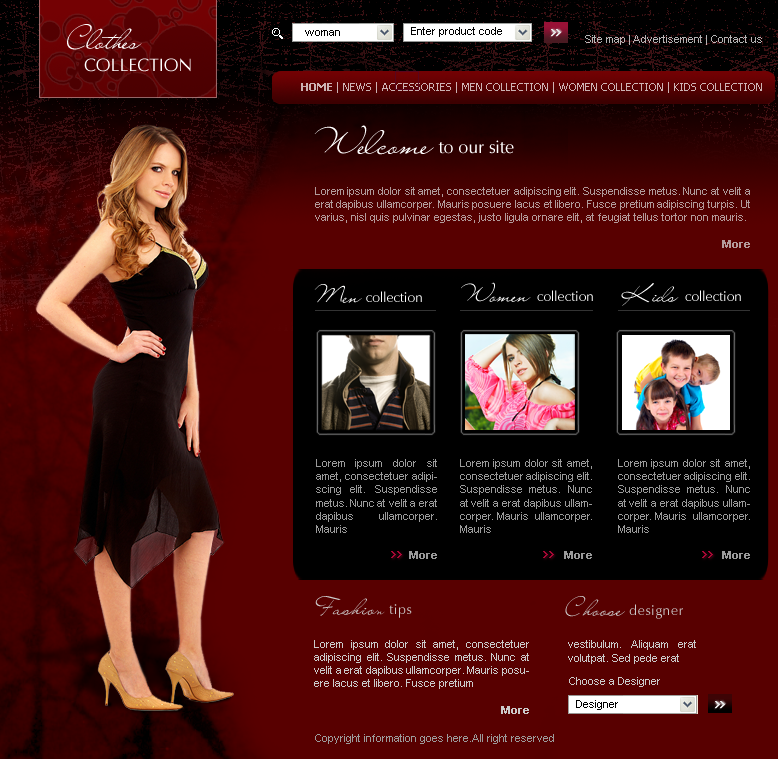
<style>
.page{position:relative;width:778px;height:759px;background:#000000}
.page>*{position:absolute;margin:0}
.t1{font:30px "LainieDaySH";color:#ffffff}
.t2{font:11px "ArialMT";color:#000000}
.t3{font:11px "ArialMT";color:#b3b3b3}
.t4{font:11px "Tahoma";letter-spacing:0.1em;color:#b3b3b3;text-transform:uppercase}
.t5{font:18px "ZapfHumanist601BT-Roman";color:#ffffff}
.t6{font:11px "Tahoma";color:#ceb3b4;text-transform:uppercase}
.t7{font:11px "Tahoma-Bold";color:#ceb3b4;text-transform:uppercase}
.t8{font:36px "LainieDaySH";color:#ffffff}
.t9{font:11px "ArialMT";color:#b29a9a}
.t10{font:11px "Arial-BoldMT";color:#b29a9a}
.t11{font:14px "ZapfHumanist601BT-Roman";color:#ffffff}
.t12{font:24px "LainieDaySH";color:#ffffff}
.t13{font:11px "ArialMT";color:#9a9a9a}
.t14{font:11px "Arial-BoldMT";color:#9a9a9a}
.t15{font:24px "LainieDaySH";letter-spacing:0.05em;color:#cbcaca}
.t16{font:14px "LainieDaySH";letter-spacing:0.05em;color:#cbcaca}
.t17{font:14px "ZapfHumanist601BT-Roman";letter-spacing:0.05em;color:#cbcaca}
.t18{font:11px "ArialMT";color:#cbcaca}
.t19{font:11px "Arial-BoldMT";color:#cbcaca}
.t20{font:11px "ArialMT";color:#9c9b9b}
</style>
<div class="page">
<p class="t1" style="left:67px;top:24px;width:75px;height:26px">Clothes</p>
<p class="t2" style="left:305px;top:30px;width:35px;height:6px">woman</p>
<p class="t2" style="left:411px;top:27px;width:91px;height:10px">Enter product code</p>
<p class="t3" style="left:585px;top:35px;width:177px;height:10px"><span class="t4"> </span>Site map | Advertisement | Contact us</p>
<p class="t5" style="left:84px;top:58px;width:107px;height:14px">COLLECTION</p>
<p class="t6" style="left:301px;top:82px;width:461px;height:11px"><span class="t7">Home</span> | News | accessories | men collection | women collection | kids collection</p>
<p class="t5" style="left:314px;top:125px;width:200px;height:30px"><span class="t8">Welcome </span>to our site</p>
<p class="t9" style="left:315px;top:187px;width:435px;height:61px;text-align:justify">Lorem ipsum dolor sit amet, consectetuer adipiscing elit. Suspendisse metus. Nunc at velit a erat dapibus ullamcorper. Mauris posuere lacus et libero. Fusce pretium adipiscing turpis. Ut varius, nisl quis pulvinar egestas, justo ligula ornare elit, at feugiat tellus tortor non mauris. <br><span class="t10"><br>More</span></p>
<p class="t11" style="left:314px;top:284px;width:108px;height:19px"><span class="t12">Men </span>collection</p>
<p class="t11" style="left:461px;top:282px;width:132px;height:20px"><span class="t12">Women </span>collection</p>
<p class="t11" style="left:621px;top:283px;width:120px;height:23px"><span class="t12">Kids </span>collection</p>
<p class="t13" style="left:316px;top:459px;width:121px;height:100px;text-align:justify">Lorem ipsum dolor sit amet, consectetuer adipiscing elit. Suspendisse metus. Nunc at velit a erat dapibus ullamcorper. Mauris  <br><span class="t14"><br>More</span></p>
<p class="t13" style="left:460px;top:459px;width:132px;height:100px;text-align:justify">Lorem ipsum dolor sit amet, consectetuer adipiscing elit. Suspendisse metus. Nunc at velit a erat dapibus ullamcorper. Mauris  ullamcorper. Mauris  <br><span class="t14"><br>More</span></p>
<p class="t13" style="left:618px;top:459px;width:132px;height:100px;text-align:justify">Lorem ipsum dolor sit amet, consectetuer adipiscing elit. Suspendisse metus. Nunc at velit a erat dapibus ullamcorper. Mauris  ullamcorper. Mauris  <br><span class="t14"><br>More</span></p>
<p class="t15" style="left:315px;top:596px;width:97px;height:22px">Fashio<span class="t16">n </span><span class="t17">tips</span></p>
<p class="t17" style="left:565px;top:596px;width:118px;height:23px"><span class="t15">Choose </span>designer</p>
<p class="t18" style="left:314px;top:640px;width:215px;height:74px;text-align:justify">Lorem ipsum dolor sit amet, consectetuer adipiscing elit. Suspendisse metus. Nunc at velit a erat dapibus ullamcorper. Mauris posuere lacus et libero. Fusce pretium<br><span class="t19"><br>More</span></p>
<p class="t18" style="left:568px;top:640px;width:128px;height:24px;text-align:justify">vestibulum. Aliquam erat volutpat. Sed pede erat</p>
<p class="t18" style="left:569px;top:677px;width:91px;height:10px">Choose a Designer</p>
<p class="t2" style="left:576px;top:700px;width:42px;height:10px">Designer</p>
<p class="t20" style="left:315px;top:734px;width:239px;height:10px">Copyright information goes here.All right reserved</p>
</div>
